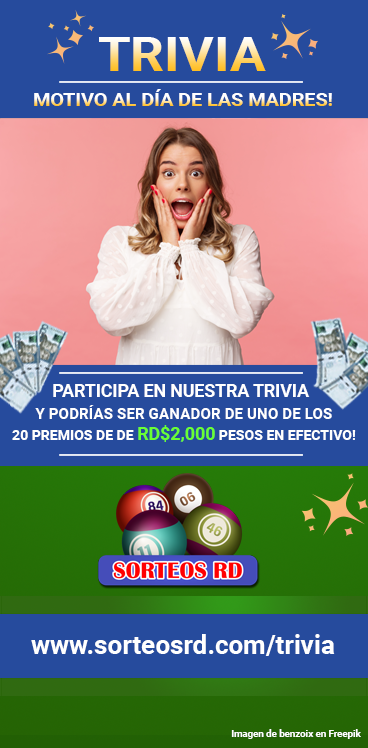
<style>
.page{position:relative;width:368px;height:748px;background:#264b9d}
.page>*{position:absolute;margin:0}
.t1{font:47.3px "Roboto-Bold";scale:1.11 1}
.t2{font:17.7px "Roboto-Bold";scale:1.11 1}
.t3{font:17.6px "Roboto-Bold";color:#ffffff}
.t4{font:15.3px "Roboto-Bold";color:#ffffff}
.t5{font:14.1px "Roboto-Bold";color:#ffffff}
.t6{font:17.8px "Roboto-Bold";color:#6aff33}
.t7{font:26px "Roboto-Bold";color:#ffffff}
.t8{font:9.7px "Roboto-Bold";color:#ffffff}
</style>
<div class="page">
<p class="t1" style="left:99px;top:37px;width:167px;height:34px">TRIVIA</p>
<p class="t2" style="left:34px;top:89px;width:298px;height:17px">MOTIVO AL DÍA DE LAS MADRES!</p>
<p class="t3" style="left:53px;top:384px;width:257px;height:13px">PARTICIPA EN NUESTRA TRIVIA</p>
<p class="t4" style="left:12px;top:405px;width:344px;height:37px;text-align:center">Y PODRÍAS SER GANADOR DE UNO DE LOS<br><span class="t5">20 PREMIOS DE DE </span><span class="t6">RD$2,000</span><span class="t5"> PESOS EN EFECTIVO!</span></p>
<p class="t7" style="left:31px;top:634px;width:304px;height:22px">www.sorteosrd.com/trivia</p>
<p class="t8" style="left:231px;top:729px;width:130px;height:10px">Imagen de benzoix en Freepik</p>
</div>
